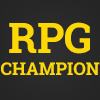
<style>
.page{position:relative;width:100px;height:100px}
.page>*{position:absolute;margin:0}
.t1{font:42.2px "RobotoSlab-Bold";color:#ffd800}
.t2{font:17.8px "RobotoSlab-Bold";color:#ffd800}
</style>
<div class="page">
<p class="t1" style="left:9px;top:22px;width:81px;height:32px">RPG</p>
<p class="t2" style="left:1px;top:62px;width:99px;height:14px">CHAMPION</p>
</div>
